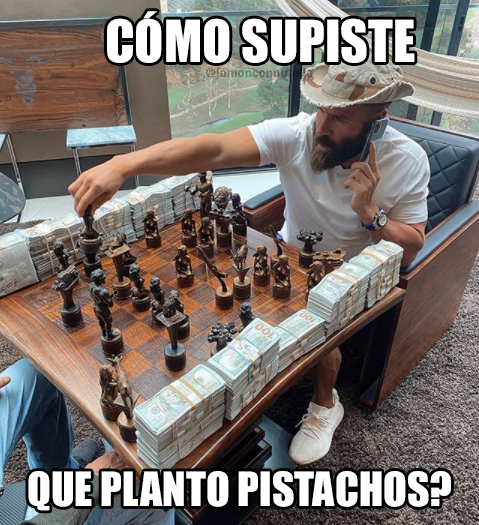
<style>
.page{position:relative;width:479px;height:525px}
.page>*{position:absolute;margin:0}
.t1{font:53.6px "Impact";color:#ffffff}
.t2{font:13.3px "FranklinGothic-Demi"}
.t3{font:43.6px "Impact";color:#ffffff}
</style>
<div class="page">
<p class="t1" style="left:107px;top:11px;width:308px;height:52px">CÓMO SUPISTE</p>
<p class="t2" style="left:206px;top:68px;width:107px;height:12px">@jamonconnutella</p>
<p class="t3" style="left:28px;top:471px;width:423px;height:40px">QUE PLANTO PISTACHOS?</p>
</div>
